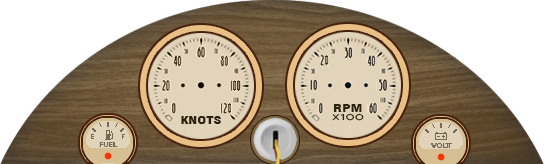
<style>
.page{position:relative;width:544px;height:164px;background:#ffffff}
.page>*{position:absolute;margin:0}
.t1{font:11.2px/8.6px "Alef-Regular";color:#2b210f;scale:1.35 1}
.t2{font:11.2px/8.6px "Swiss721BT-BlackCondensed";color:#2b210f;scale:1.35 1}
.t3{font:11.2px "Swiss721BT-BlackCondensed";color:#2b210f;scale:1.35 1}
.t4{font:6.4px "MyriadPro-Regular";color:#746b5a;scale:1.35 1}
</style>
<div class="page">
<p class="t1" style="left:332px;top:104px;width:32px;height:17px;text-align:center"><span class="t2">RPM<br></span>x100</p>
<p class="t3" style="left:181px;top:116px;width:40px;height:8px">KNOTS</p>
<p class="t4" style="left:99px;top:142px;width:19px;height:5px">FUEL</p>
<p class="t4" style="left:431px;top:143px;width:19px;height:5px">VOLT</p>
</div>
